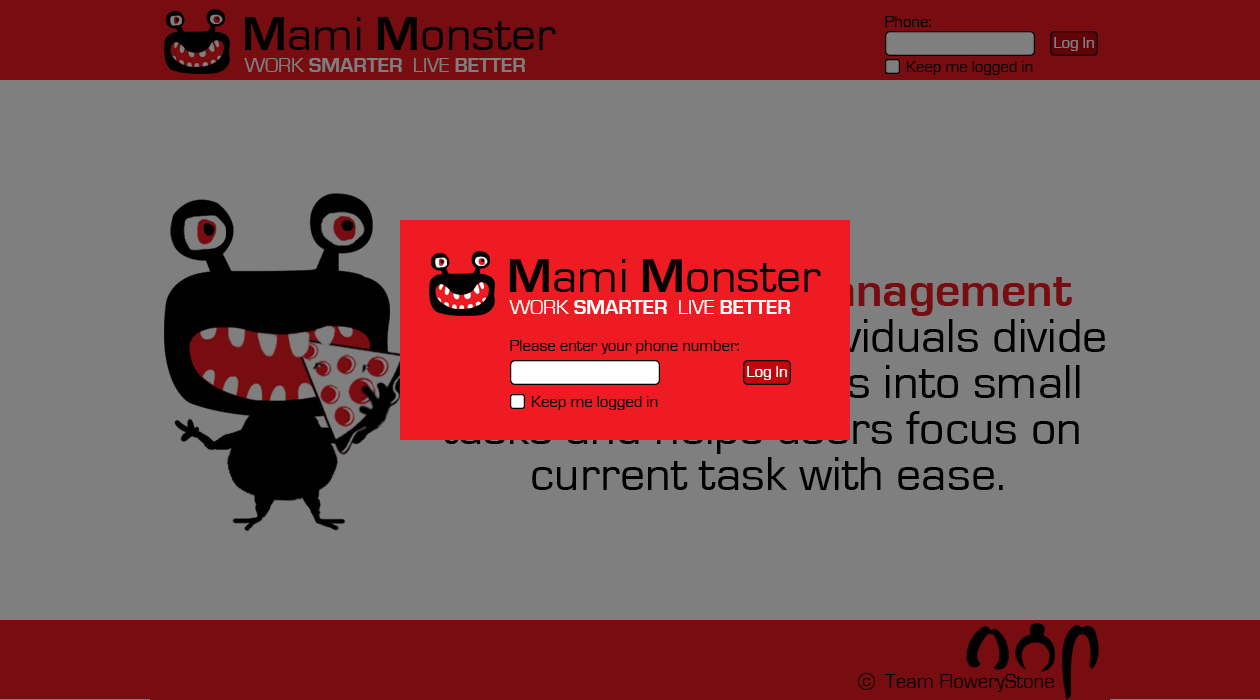
<style>
.page{position:relative;width:1260px;height:700px;background:#7f7f7f}
.page>*{position:absolute;margin:0}
.t1{font:50px "EurostileRegular";color:#000000}
.t2{font:50px "EurostileBold";color:#000000}
.t3{font:16.7px "EurostileRegular";color:#000000}
.t4{font:16.7px "EurostileRegular";color:#7f7f7f}
.t5{font:20.8px "EurostileBold";color:#7f7f7f}
.t6{font:20.8px "EurostileRegular";color:#7f7f7f}
.t7{font:50px/45.8px "EurostileRegular";color:#000000}
.t8{font:50px/45.8px "EurostileBold";color:#ee1b22}
.t9{font:20.8px "EurostileBold";color:#ffffff}
.t10{font:20.8px "EurostileRegular";color:#ffffff}
.t11{font:16.7px "EurostileRegular";color:#ffffff}
.t12{font:17.7px "EurostileRegular";color:#000000}
.t13{font:20.8px "EurostileRegular";color:#000000}
</style>
<div class="page">
<p class="t1" style="left:244px;top:17px;width:312px;height:33px"><span class="t2">M</span>ami <span class="t2">M</span>onster</p>
<p class="t3" style="left:885px;top:16px;width:46px;height:11px">Phone:</p>
<p class="t4" style="left:1054px;top:37px;width:40px;height:14px">Log In</p>
<p class="t5" style="left:244px;top:58px;width:281px;height:14px"><span class="t6">WORK </span>SMARTER<span class="t6">  LIVE </span>BETTER</p>
<p class="t3" style="left:906px;top:61px;width:127px;height:14px">Keep me logged in</p>
<p class="t1" style="left:509px;top:259px;width:312px;height:33px"><span class="t2">M</span>ami <span class="t2">M</span>onster</p>
<p class="t7" style="left:416px;top:273px;width:689px;height:217px;text-align:center">A gamified <span class="t8">time-management</span> <br>website that lets individuals divide <br>their long-term goals into small <br>tasks and helps users focus on <br>current task with ease.</p>
<p class="t9" style="left:509px;top:300px;width:281px;height:14px"><span class="t10">WORK </span>SMARTER<span class="t10">  LIVE </span>BETTER</p>
<p class="t3" style="left:510px;top:340px;width:229px;height:14px">Please enter your phone number:</p>
<p class="t11" style="left:747px;top:366px;width:40px;height:14px">Log In</p>
<p class="t3" style="left:531px;top:396px;width:127px;height:14px">Keep me logged in</p>
<p class="t12" style="left:862px;top:678px;width:9px;height:8px">c</p>
<p class="t13" style="left:885px;top:674px;width:169px;height:18px">Team FloweryStone</p>
</div>
